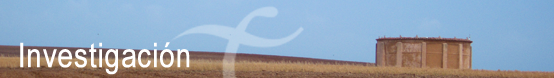
<style>
.page{position:relative;width:554px;height:78px}
.page>*{position:absolute;margin:0}
.t1{font:34px "ArialNarrow";color:#ffffff;font-weight:bold}
</style>
<div class="page">
<p class="t1" style="left:20px;top:42px;width:170px;height:33px">Investigación</p>
</div>
